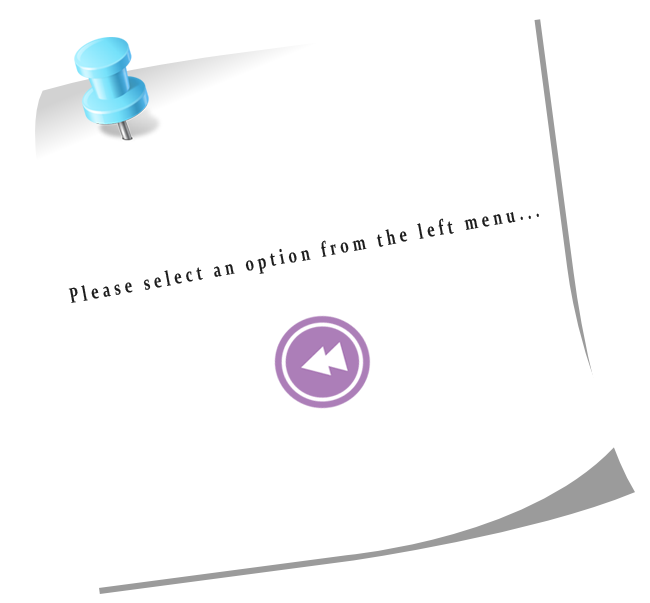
<style>
.page{position:relative;width:650px;height:603px;background:#ffffff}
.page>*{position:absolute;margin:0}
.t1{font:21px "Constantia-Bold";letter-spacing:0.3em;color:#1d1d1d;scale:0.67 1}
</style>
<div class="page">
<p class="t1" style="left:68px;top:212px;width:471px;height:91px;rotate:-10deg">Please select an option from the left menu...</p>
</div>
